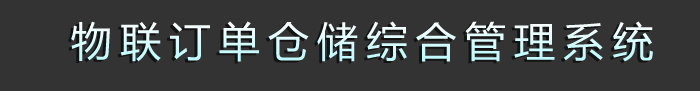
<style>
.page{position:relative;width:700px;height:91px;background:#333333}
.page>*{position:absolute;margin:0}
.t1{font:41px "MicrosoftYaHei";letter-spacing:0.2em}
</style>
<div class="page">
<p class="t1" style="left:71px;top:21px;width:582px;height:41px">物联订单仓储综合管理系统</p>
</div>
